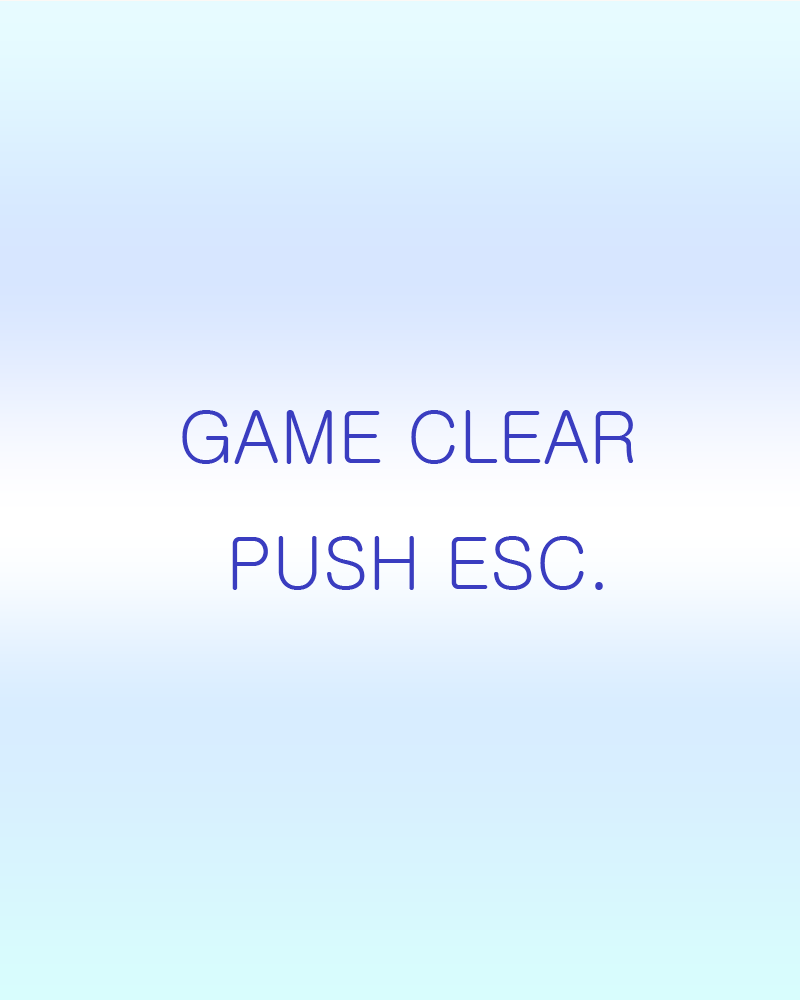
<style>
.page{position:relative;width:800px;height:1000px}
.page>*{position:absolute;margin:0}
.t1{font:72px "Gulim";color:#3a3dc0}
</style>
<div class="page">
<p class="t1" style="left:182px;top:410px;width:452px;height:180px">GAME CLEAR<br>  PUSH ESC.</p>
</div>
